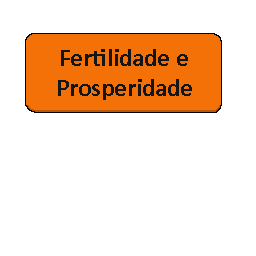
<style>
.page{position:relative;width:256px;height:256px;background:#ffffff}
.page>*{position:absolute;margin:0}
.t1{font:25px "Calibri-Bold";color:#141619}
</style>
<div class="page">
<p class="t1" style="left:58px;top:49px;width:134px;height:51px;text-align:center">Fertilidade e Prosperidade</p>
</div>
